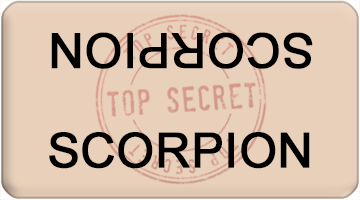
<style>
.page{position:relative;width:360px;height:200px;background:#e8d0bb}
.page>*{position:absolute;margin:0}
.t1{font:48px "ArialMT";color:#000000;font-weight:bold}
</style>
<div class="page">
<p class="t1" style="left:51px;top:32px;width:262px;height:37px;rotate:180deg">SCORPION</p>
<p class="t1" style="left:49px;top:132px;width:261px;height:37px">SCORPION</p>
</div>
